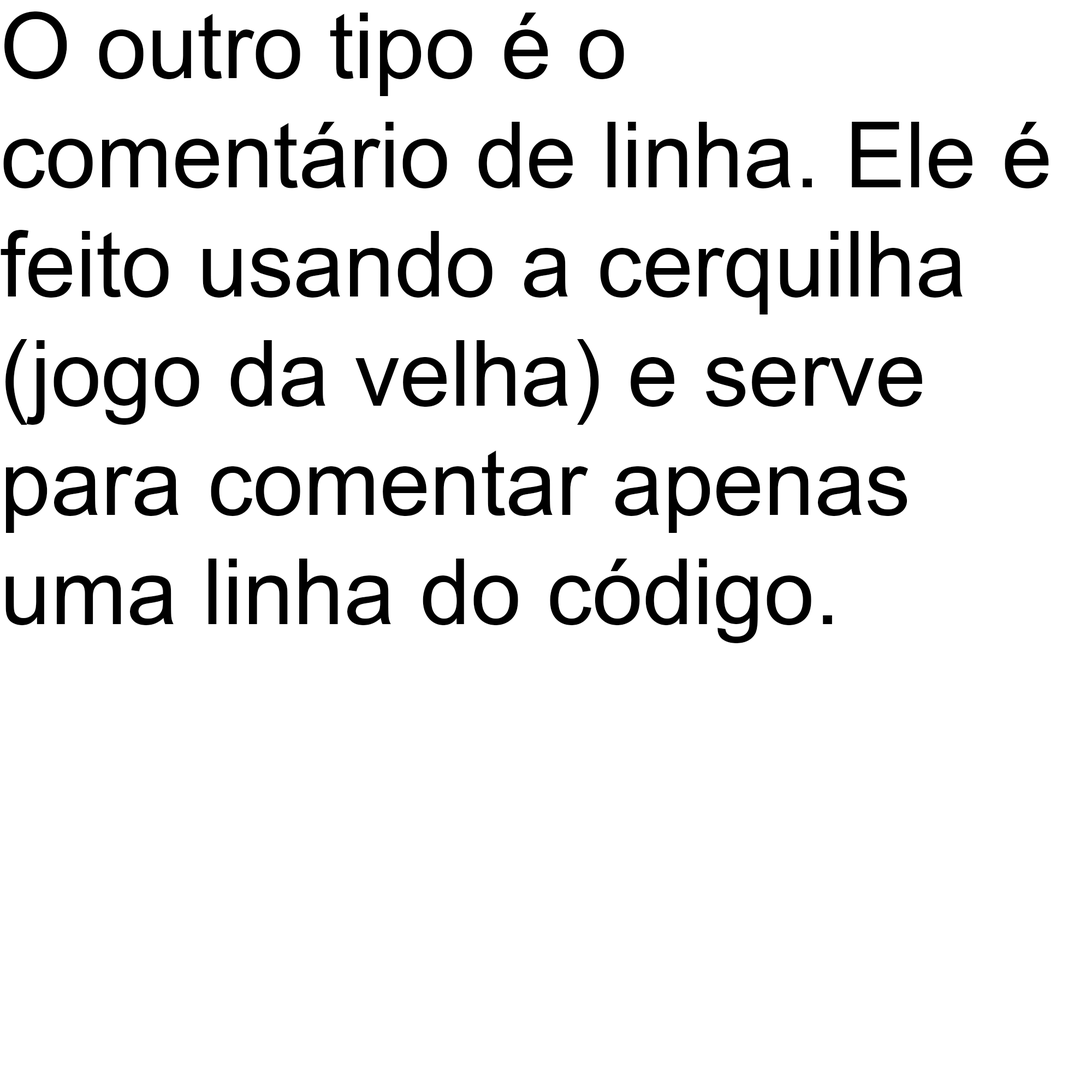
<style>
.page{position:relative;width:1092px;height:1092px;background:#ffffff}
.page>*{position:absolute;margin:0}
.t1{font:91px "ArialMT";color:#000000}
</style>
<div class="page">
<p class="t1" style="left:1px;top:11px;width:1048px;height:632px">O outro tipo é o<br>comentário de linha. Ele é<br>feito usando a cerquilha<br>(jogo da velha) e serve<br>para comentar apenas<br>uma linha do código.</p>
</div>
